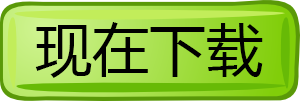
<style>
.page{position:relative;width:300px;height:101px}
.page>*{position:absolute;margin:0}
.t1{font:56.9px "MicrosoftYaHei";color:#000000}
</style>
<div class="page">
<p class="t1" style="left:35px;top:22px;width:228px;height:56px">现在下载</p>
</div>
